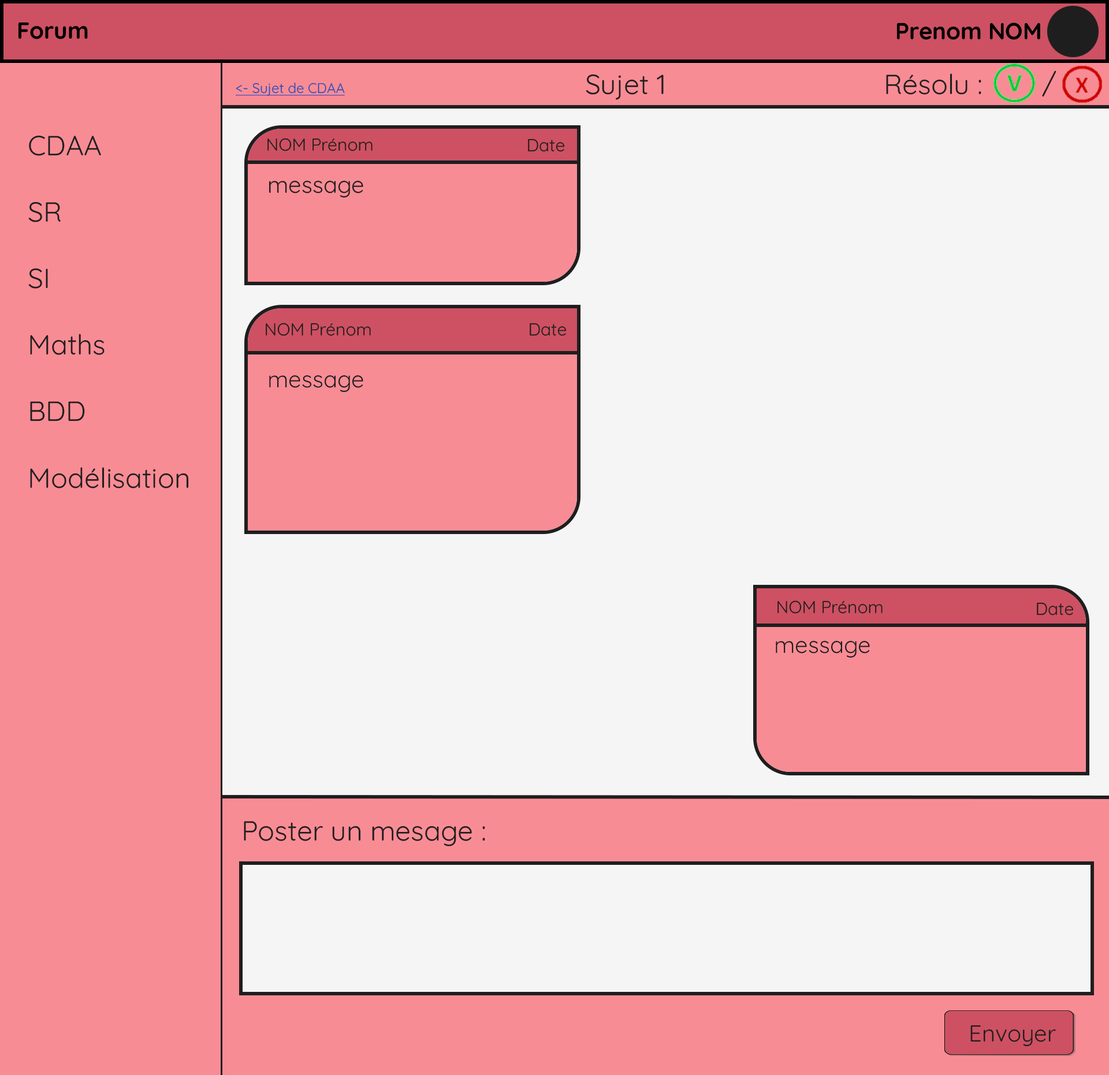
<style>
.page{position:relative;width:1109px;height:1075px;background:#f5f5f5}
.page>*{position:absolute;margin:0}
.t1{font:27.7px "Quicksand-Regular";color:#1f1e1f}
.t2{font:13.9px "Quicksand-Regular";color:#1e4cb8;text-decoration:underline}
.t3{font:17.3px "Quicksand-Regular";color:#1f1e1f}
.t4{font:23.1px "Quicksand-Regular";color:#1f1e1f}
</style>
<div class="page">
<p class="t1" style="left:586px;top:74px;width:78px;height:26px">Sujet 1</p>
<p class="t1" style="left:886px;top:73px;width:95px;height:22px">Résolu :</p>
<p class="t1" style="left:1042px;top:70px;width:14px;height:27px">/</p>
<p class="t2" style="left:236px;top:83px;width:109px;height:13px">&lt;- Sujet de CDAA</p>
<p class="t1" style="left:28px;top:135px;width:161px;height:354px">CDAA<br><br>SR<br><br>SI<br><br>Maths<br><br>BDD<br><br>Modélisation</p>
<p class="t3" style="left:267px;top:138px;width:106px;height:13px">NOM Prénom</p>
<p class="t3" style="left:528px;top:139px;width:37px;height:13px">Date</p>
<p class="t4" style="left:269px;top:180px;width:94px;height:18px">message</p>
<p class="t3" style="left:266px;top:323px;width:105px;height:13px">NOM Prénom</p>
<p class="t3" style="left:530px;top:323px;width:37px;height:13px">Date</p>
<p class="t4" style="left:269px;top:375px;width:94px;height:17px">message</p>
<p class="t3" style="left:777px;top:601px;width:105px;height:13px">NOM Prénom</p>
<p class="t3" style="left:1037px;top:602px;width:37px;height:14px">Date</p>
<p class="t4" style="left:776px;top:641px;width:94px;height:17px">message</p>
<p class="t1" style="left:244px;top:821px;width:241px;height:26px">Poster un mesage :</p>
<p class="t4" style="left:970px;top:1025px;width:86px;height:22px">Envoyer</p>
</div>
